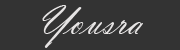
<style>
.page{position:relative;width:180px;height:50px;background:#333333}
.page>*{position:absolute;margin:0}
.t1{font:44px "VladimirScript";color:#e6e4e4}
</style>
<div class="page">
<p class="t1" style="left:42px;top:5px;width:101px;height:43px">Yousra</p>
</div>
